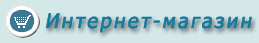
<style>
.page{position:relative;width:259px;height:43px;background:#d4e8e8}
.page>*{position:absolute;margin:0}
.t1{font:20px "Tahoma";letter-spacing:0.099em;color:#16799e;font-weight:bold;font-style:italic}
</style>
<div class="page">
<p class="t1" style="left:46px;top:13px;width:206px;height:20px">Интернет-магазин</p>
</div>
